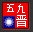
<style>
.page{position:relative;width:33px;height:32px;background:#f20000}
.page>*{position:absolute;margin:0}
.t1{font:10.4px "SimSun";color:#ffffff}
.t2{font:11.7px "SimSun";color:#ffffff}
</style>
<div class="page">
<p class="t1" style="left:7px;top:4px;width:18px;height:9px">五九</p>
<p class="t2" style="left:16px;top:15px;width:11px;height:12px">晋</p>
</div>
